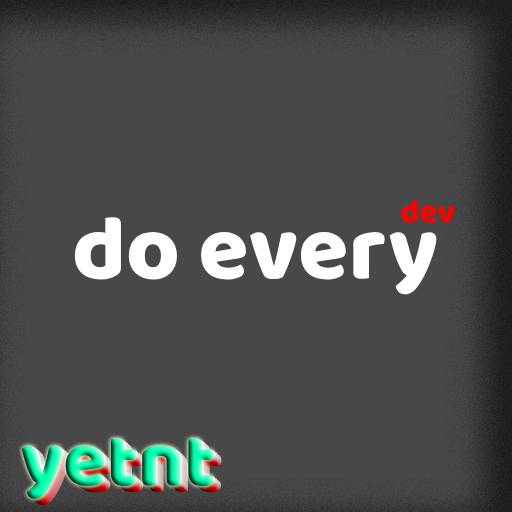
<style>
.page{position:relative;width:512px;height:512px;background:#484848}
.page>*{position:absolute;margin:0}
.t1{font:33px "Baloo";color:#ff0000}
.t2{font:92px "Baloo";color:#ffffff}
.t3{font:79px "Baloo"}
</style>
<div class="page">
<p class="t1" style="left:401px;top:200px;width:54px;height:23px">dev</p>
<p class="t2" style="left:74px;top:217px;width:363px;height:78px">do every</p>
<p class="t3" style="left:21px;top:438px;width:193px;height:61px">yetnt</p>
</div>
